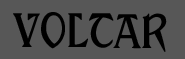
<style>
.page{position:relative;width:185px;height:59px;background:#575757}
.page>*{position:absolute;margin:0}
.t1{font:51.4px "Cabaletta";color:#000000}
</style>
<div class="page">
<p class="t1" style="left:13px;top:12px;width:154px;height:40px">Voltar</p>
</div>
